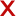
<style>
.page{position:relative;width:16px;height:16px;background:#ffffff}
.page>*{position:absolute;margin:0}
.t1{font:34.5px "GillSans";letter-spacing:0.125em;color:#bf0808;scale:0.89 1}
</style>
<div class="page">
<p class="t1" style="left:0px;top:0px;width:16px;height:16px">x</p>
</div>
